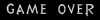
<style>
.page{position:relative;width:100px;height:20px;background:#000000}
.page>*{position:absolute;margin:0}
.t1{font:15.5px "RWBY_Style";letter-spacing:0.14em;color:#d4d4d4;scale:1.08 1}
</style>
<div class="page">
<p class="t1" style="left:6px;top:3px;width:88px;height:14px">Game over</p>
</div>
